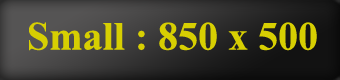
<style>
.page{position:relative;width:340px;height:80px}
.page>*{position:absolute;margin:0}
.t1{font:40px "TimesNewRomanPS-BoldMT";color:#d7cf02}
</style>
<div class="page">
<p class="t1" style="left:29px;top:22px;width:288px;height:29px">Small : 850 x 500</p>
</div>
